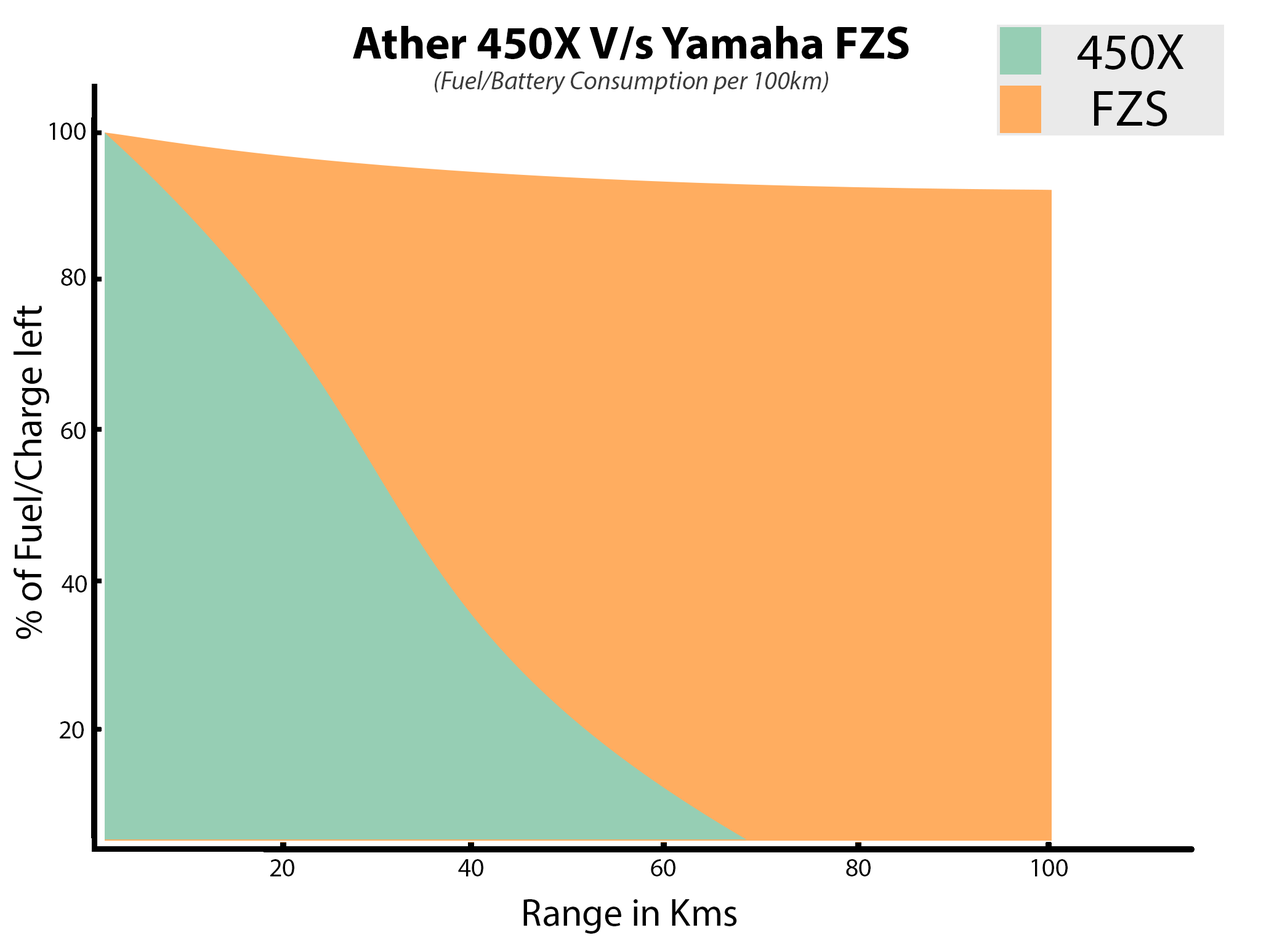
<style>
.page{position:relative;width:1261px;height:946px;background:#ffffff}
.page>*{position:absolute;margin:0}
.t1{font:25.7px "MyriadPro-It";color:#3a3a3a}
.t2{font:46.2px "MyriadPro-Bold";color:#000000}
.t3{font:51.3px "MyriadPro-Regular";color:#000000}
.t4{font:25.7px "MyriadPro-Regular";color:#000000}
.t5{font:38.5px "MyriadPro-Regular";color:#000000}
</style>
<div class="page">
<p class="t1" style="left:353px;top:26px;width:556px;height:69px;text-align:center"><span class="t2">Ather 450X V/s Yamaha FZS<br></span>(Fuel/Battery Consumption per 100km)</p>
<p class="t3" style="left:1077px;top:34px;width:107px;height:36px">450X</p>
<p class="t3" style="left:1094px;top:91px;width:73px;height:35px">FZS</p>
<p class="t4" style="left:49px;top:123px;width:37px;height:17px">100</p>
<p class="t4" style="left:61px;top:268px;width:25px;height:18px">80</p>
<p class="t5" style="left:14px;top:305px;width:35px;height:334px;rotate:-90deg">% of Fuel/Charge left</p>
<p class="t4" style="left:61px;top:422px;width:25px;height:17px">60</p>
<p class="t4" style="left:62px;top:575px;width:25px;height:17px">40</p>
<p class="t4" style="left:60px;top:721px;width:24px;height:17px">20</p>
<p class="t4" style="left:270px;top:859px;width:24px;height:17px">20</p>
<p class="t4" style="left:458px;top:859px;width:25px;height:17px">40</p>
<p class="t4" style="left:651px;top:859px;width:24px;height:17px">60</p>
<p class="t4" style="left:846px;top:859px;width:25px;height:17px">80</p>
<p class="t4" style="left:1031px;top:859px;width:37px;height:17px">100</p>
<p class="t5" style="left:523px;top:899px;width:214px;height:34px">Range in Kms</p>
</div>
